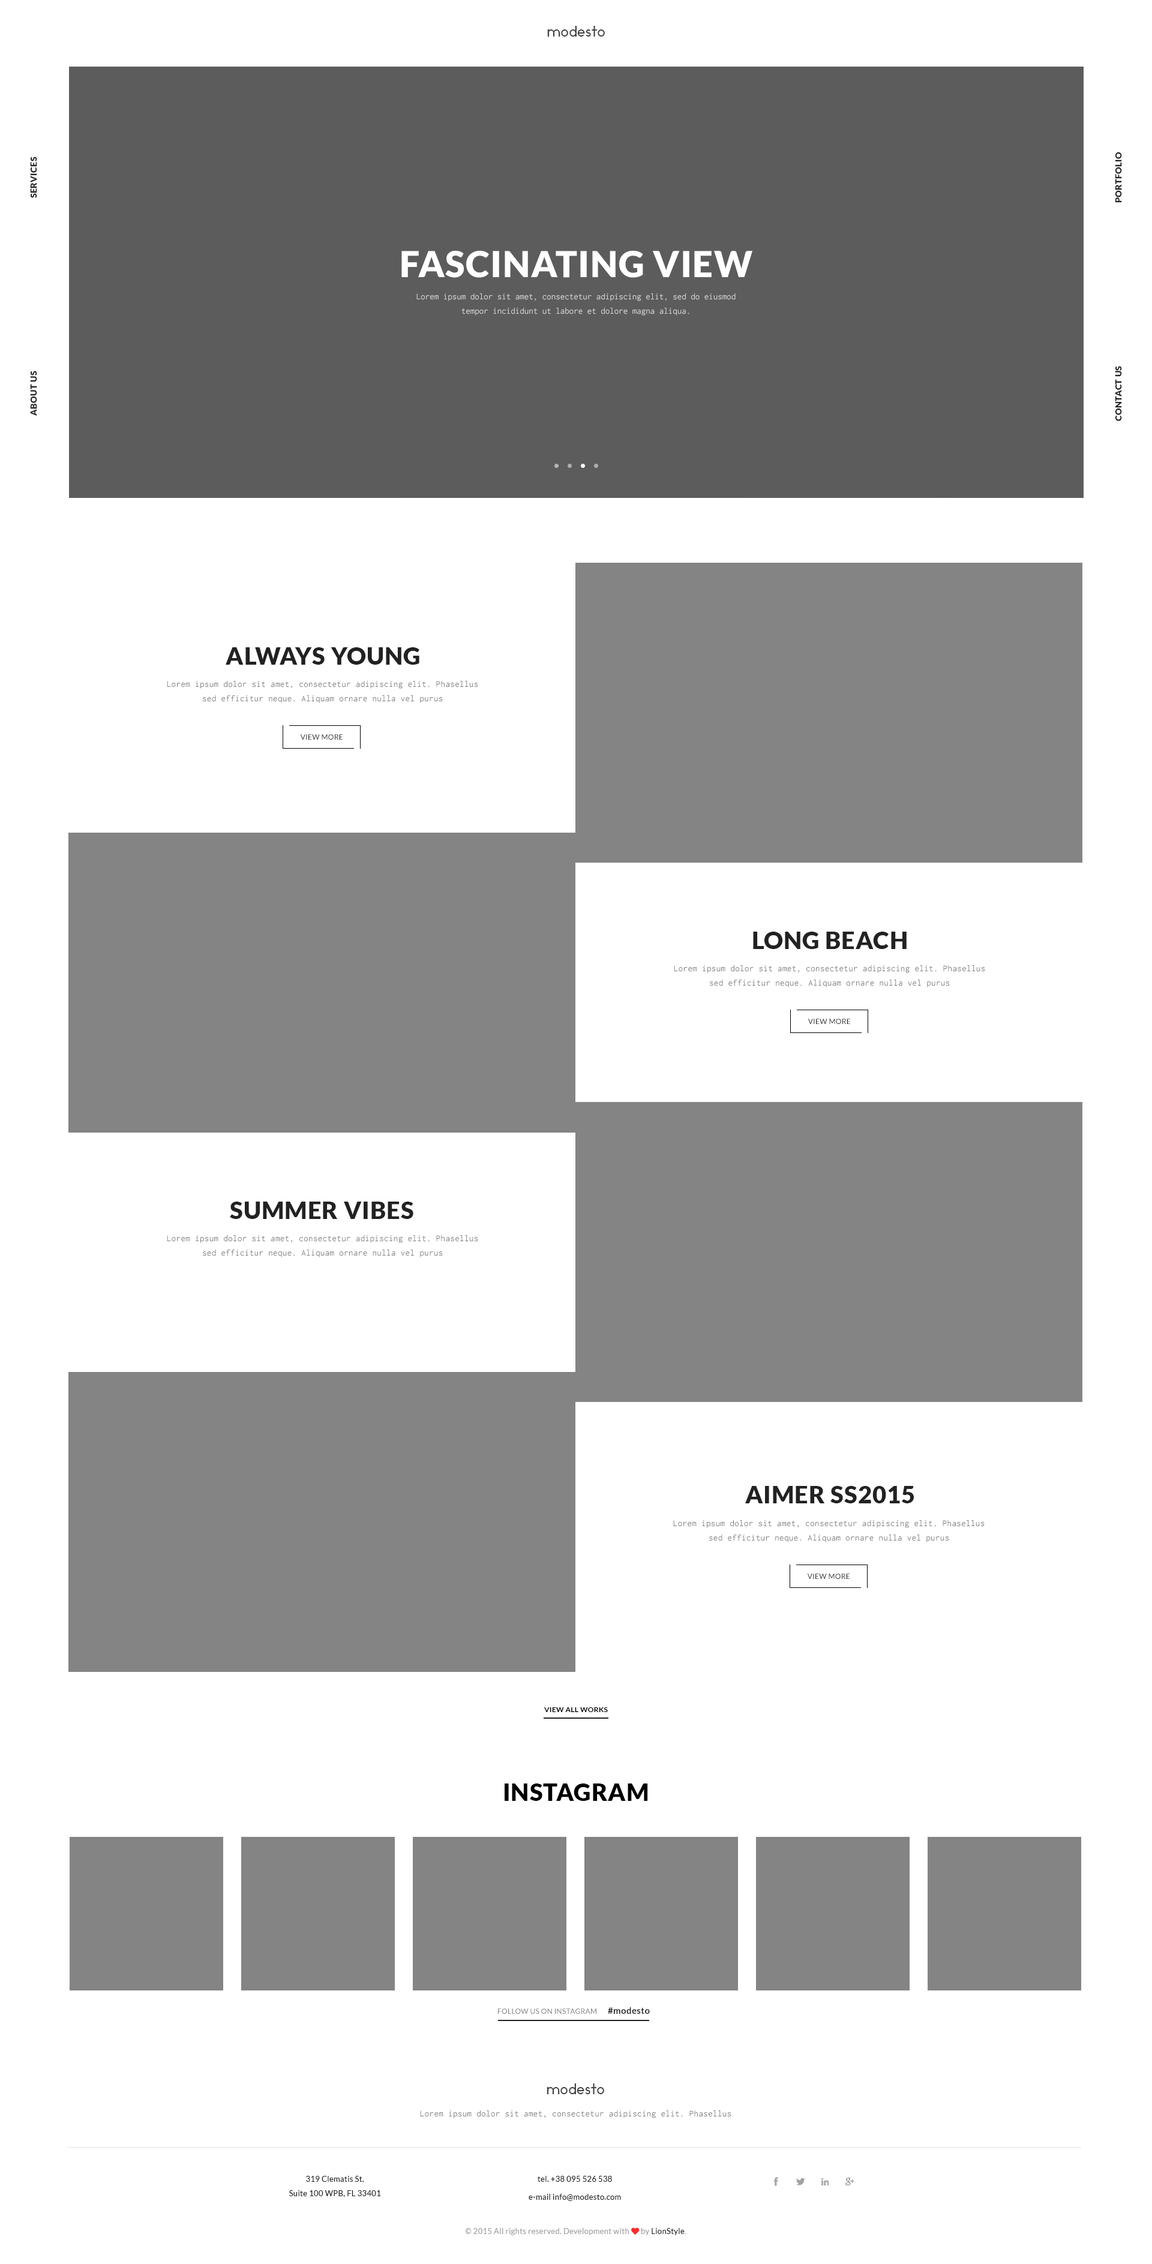
<style>
.page{position:relative;width:1152px;height:2264px;background:#ffffff}
.page>*{position:absolute;margin:0}
.t1{font:14.4px "Ikaros";letter-spacing:0.025em;color:#444444}
.t2{font:8.4px "Lato-Black";letter-spacing:0.025em;color:#222222;text-transform:uppercase;scale:1.03 1}
.t3{font:36px "Lato-Black";letter-spacing:0.025em;color:#ffffff;text-transform:uppercase}
.t4{font:9px/14.4px "Inconsolata";color:#d7d7d7}
.t5{font:24px "Lato-Black";letter-spacing:0.025em;color:#222222;text-transform:uppercase}
.t6{font:9px/14.4px "Inconsolata";letter-spacing:0.025em;color:#7e7e7e}
.t7{font:7.2px "Lato-Regular";letter-spacing:0.025em;color:#222222;text-transform:uppercase}
.t8{font:7.2px "Lato-Bold";letter-spacing:0.025em;color:#000000;text-transform:uppercase}
.t9{font:24px "Lato-Black";letter-spacing:0.025em;color:#000000;text-transform:uppercase}
.t10{font:7.2px "Lato-Regular";letter-spacing:0.025em;color:#7e7e7e;text-transform:uppercase}
.t11{font:9px "Lato-Bold";letter-spacing:0.025em;color:#222222}
.t12{font:9px "Inconsolata";letter-spacing:0.025em;color:#7e7e7e}
.t13{font:7.8px/14.4px "Lato-Regular";letter-spacing:0.025em;color:#222222}
.t14{font:7.8px/18px "Lato-Regular";letter-spacing:0.025em;color:#222222}
.t15{font:7.8px "Lato-Regular";letter-spacing:0.025em;color:#a1a1a1}
.t16{font:7.8px "FontAwesome";letter-spacing:0.025em;color:#fe2b2b}
.t17{font:7.8px "Lato-Regular";letter-spacing:0.025em;color:#222222}
.t18{font:7.8px "Lato-Regular";letter-spacing:0.025em;color:#b5b5b5}
</style>
<div class="page">
<p class="t1" style="left:547px;top:26px;width:58px;height:11px">modesto</p>
<p class="t2" style="left:30px;top:157px;width:7px;height:41px;rotate:-90deg">services</p>
<p class="t2" style="left:1115px;top:152px;width:7px;height:51px;rotate:-90deg">portfolio</p>
<p class="t3" style="left:401px;top:251px;width:351px;height:27px">fascinating view</p>
<p class="t4" style="left:416px;top:293px;width:320px;height:23px;text-align:center">Lorem ipsum dolor sit amet, consectetur adipiscing elit, sed do eiusmod tempor incididunt ut labore et dolore magna aliqua.</p>
<p class="t2" style="left:1115px;top:366px;width:7px;height:55px;rotate:-90deg">contact us</p>
<p class="t2" style="left:30px;top:371px;width:7px;height:45px;rotate:-90deg">about us</p>
<p class="t5" style="left:226px;top:647px;width:193px;height:18px">always young</p>
<p class="t6" style="left:167px;top:681px;width:311px;height:22px;text-align:center">Lorem ipsum dolor sit amet, consectetur adipiscing elit. Phasellus sed efficitur neque. Aliquam ornare nulla vel purus</p>
<p class="t7" style="left:300px;top:734px;width:43px;height:6px">view more</p>
<p class="t5" style="left:753px;top:932px;width:154px;height:17px">Long Beach</p>
<p class="t6" style="left:674px;top:965px;width:311px;height:23px;text-align:center">Lorem ipsum dolor sit amet, consectetur adipiscing elit. Phasellus sed efficitur neque. Aliquam ornare nulla vel purus</p>
<p class="t7" style="left:808px;top:1019px;width:42px;height:5px">view more</p>
<p class="t5" style="left:230px;top:1202px;width:183px;height:17px">Summer Vibes</p>
<p class="t6" style="left:167px;top:1235px;width:311px;height:23px;text-align:center">Lorem ipsum dolor sit amet, consectetur adipiscing elit. Phasellus sed efficitur neque. Aliquam ornare nulla vel purus</p>
<p class="t5" style="left:745px;top:1486px;width:169px;height:18px">Aimer SS2015</p>
<p class="t6" style="left:673px;top:1520px;width:312px;height:23px;text-align:center">Lorem ipsum dolor sit amet, consectetur adipiscing elit. Phasellus sed efficitur neque. Aliquam ornare nulla vel purus</p>
<p class="t7" style="left:807px;top:1574px;width:43px;height:5px">view more</p>
<p class="t8" style="left:544px;top:1708px;width:64px;height:4px">view all works</p>
<p class="t9" style="left:505px;top:1784px;width:143px;height:17px">INSTAGRAM</p>
<p class="t10" style="left:498px;top:2009px;width:98px;height:5px">follow us on instagram</p>
<p class="t11" style="left:608px;top:2008px;width:42px;height:6px">#modesto</p>
<p class="t1" style="left:547px;top:2084px;width:57px;height:11px">modesto</p>
<p class="t12" style="left:420px;top:2111px;width:311px;height:8px">Lorem ipsum dolor sit amet, consectetur adipiscing elit. Phasellus</p>
<p class="t13" style="left:289px;top:2176px;width:92px;height:22px;text-align:center">319 Clematis St.<br>Suite 100 WPB, FL 33401</p>
<p class="t14" style="left:529px;top:2176px;width:92px;height:25px;text-align:center">tel. +38 095 526 538<br>e-mail info@modesto.com</p>
<p class="t15" style="left:465px;top:2228px;width:221px;height:8px">© 2015 All rights reserved. Development with <span class="t16">♥ </span>by<span class="t17"> LionStyle</span><span class="t18">.</span></p>
</div>
